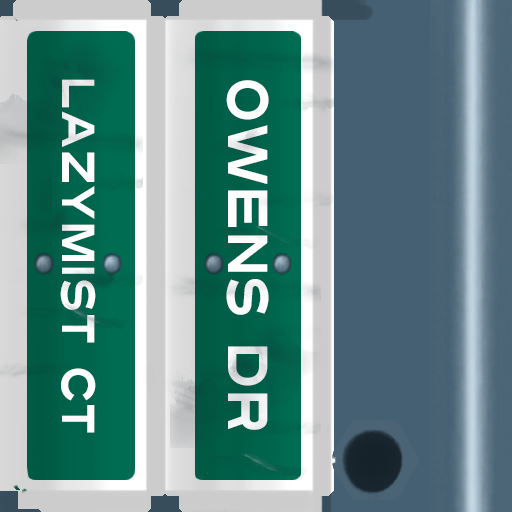
<style>
.page{position:relative;width:512px;height:512px}
.page>*{position:absolute;margin:0}
.t1{font:46px "Turnpike";color:#fefeff;scale:0.75 1}
.t2{font:56px "Turnpike";color:#fefeff;scale:0.75 1}
</style>
<div class="page">
<p class="t1" style="left:60px;top:79px;width:36px;height:354px;rotate:90deg">Lazymist Ct</p>
<p class="t2" style="left:226px;top:80px;width:43px;height:350px;rotate:90deg">Owens Dr</p>
</div>
